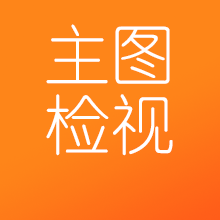
<style>
.page{position:relative;width:220px;height:220px;background:#fe8519}
.page>*{position:absolute;margin:0}
.t1{font:65.2px/69.8px "YouYuan";color:#ffffff}
</style>
<div class="page">
<p class="t1" style="left:46px;top:24px;width:127px;height:132px">主图<br>检视</p>
</div>
